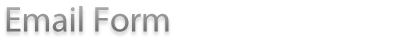
<style>
.page{position:relative;width:400px;height:50px;background:#ffffff}
.page>*{position:absolute;margin:0}
.t1{font:36px "MyriadPro-Regular";letter-spacing:-0.005em;color:#808080}
</style>
<div class="page">
<p class="t1" style="left:6px;top:6px;width:163px;height:26px">Email Form</p>
</div>
